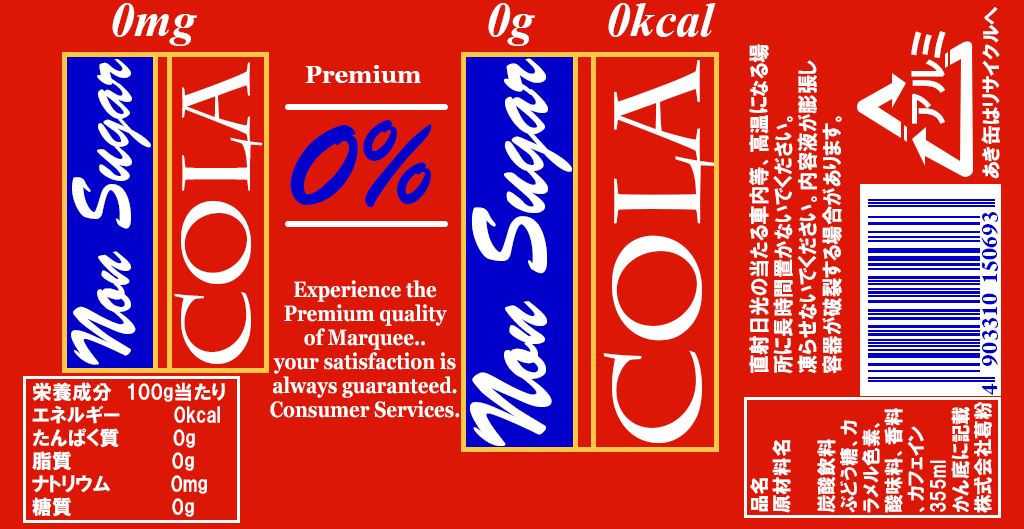
<style>
.page{position:relative;width:1024px;height:529px;background:#dd1705}
.page>*{position:absolute;margin:0}
.t1{font:60px "Vijaya-Bold";color:#ffffff}
.t2{font:20px "HGPSoeiKakugothicUB";color:#ffffff}
.t3{font:40px "MeiryoUI-Bold";color:#ffffff}
.t4{font:21.1px/24.3px "HGPSoeiKakugothicUB";color:#ffffff;scale:0.92 1}
.t5{font:84.6px "BrushScriptStd";color:#ffffff;scale:0.81 1}
.t6{font:97.6px "CharlemagneStd-Bold";color:#ffffff}
.t7{font:24px "Vani-Bold";color:#ffffff}
.t8{font:106.7px "BrushScriptStd";color:#ffffff;scale:0.81 1}
.t9{font:123.5px "CharlemagneStd-Bold";color:#ffffff}
.t10{font:120px "BrushScriptStd";color:#0000ca}
.t11{font:24px "ArnoPro-Bold";color:#0000ca}
.t12{font:22px/24px "Vani-Bold";color:#ffffff;scale:0.85 1}
.t13{font:20px/23px "HGPSoeiKakugothicUB";color:#ffffff}
.t14{font:19.4px/22.4px "HGPSoeiKakugothicUB";color:#ffffff;scale:0.96 1}
</style>
<div class="page">
<p class="t1" style="left:112px;top:3px;width:604px;height:43px">0mg                        0g      0kcal</p>
<p class="t2" style="left:981px;top:7px;width:19px;height:172px;rotate:-90deg">あき缶はリサイクルへ</p>
<p class="t3" style="left:911px;top:31px;width:35px;height:93px;rotate:-90deg">アルミ</p>
<p class="t4" style="left:749px;top:44px;width:93px;height:330px;rotate:-90deg">直射日光の当たる車内等、高温になる場<br>所に長時間置かないでください。<br>凍らせないでください。内容液が膨張し<br>容器が破裂する場合があります。</p>
<p class="t5" style="left:71px;top:59px;width:80px;height:306px;rotate:-90deg">Non Sugar</p>
<p class="t6" style="left:174px;top:62px;width:89px;height:302px;rotate:-90deg">COLA</p>
<p class="t7" style="left:305px;top:65px;width:116px;height:18px">Premium</p>
<p class="t8" style="left:470px;top:58px;width:102px;height:388px;rotate:-90deg">Non Sugar</p>
<p class="t9" style="left:603px;top:60px;width:113px;height:383px;rotate:-90deg">COLA</p>
<p class="t10" style="left:290px;top:120px;width:142px;height:88px">0%</p>
<p class="t11" style="left:981px;top:212px;width:17px;height:183px;rotate:-90deg">4    903310  150693</p>
<p class="t12" style="left:270px;top:280px;width:190px;height:138px;text-align:center">Experience the<br>Premium quality<br>of Marquee..<br>your satisfaction is<br>always guaranteed.<br>Consumer Services.</p>
<p class="t13" style="left:32px;top:382px;width:193px;height:135px">栄養成分  100g当たり<br>エネルギー　　　　0kcal<br>たんぱく質　　　　0g<br>脂質　　　　　　　 0g<br>ナトリウム　　　　 0mg<br>糖質　　　　　　　 0g</p>
<p class="t14" style="left:750px;top:402px;width:242px;height:111px;rotate:-90deg">品名<br>原材料名<br><br>炭酸飲料<br>ぶどう糖、カ<br>ラメル色素、<br>酸味料、香料<br>、カフェイン<br>355ml<br>かん底に記載<br>株式会社葛粉</p>
</div>
